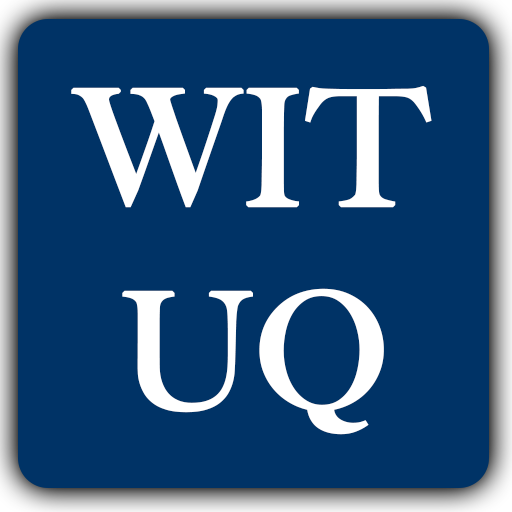
<style>
.page{position:relative;width:512px;height:512px;background:#003366}
.page>*{position:absolute;margin:0}
.t1{font:160px "BigCaslon-Medium";color:#ffffff;font-weight:bold}
</style>
<div class="page">
<p class="t1" style="left:71px;top:85px;width:361px;height:123px">WIT</p>
<p class="t1" style="left:122px;top:288px;width:262px;height:147px">UQ</p>
</div>
